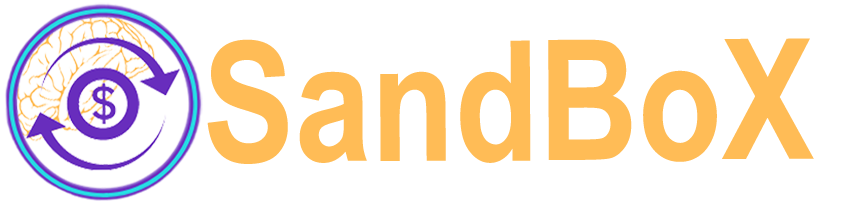
<style>
.page{position:relative;width:841px;height:206px;background:#ffffff}
.page>*{position:absolute;margin:0}
.t1{font:167.5px "ArialNarrow-Bold";color:#ffbc56}
</style>
<div class="page">
<p class="t1" style="left:207px;top:38px;width:607px;height:126px">SandBoX</p>
</div>
